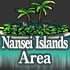
<style>
.page{position:relative;width:70px;height:70px;background:#333333}
.page>*{position:absolute;margin:0}
.t1{font:16px/15px "RyuminPro-ExBold";letter-spacing:-0.08em;color:#ffffff;scale:0.7 1}
.t2{font:16px/15px "RyuminPro-ExBold";letter-spacing:-0.04em;color:#ffffff;scale:0.9 1}
</style>
<div class="page">
<p class="t1" style="left:1px;top:36px;width:67px;height:28px;text-align:center">Nansei Islands<br><span class="t2">Area</span></p>
</div>
